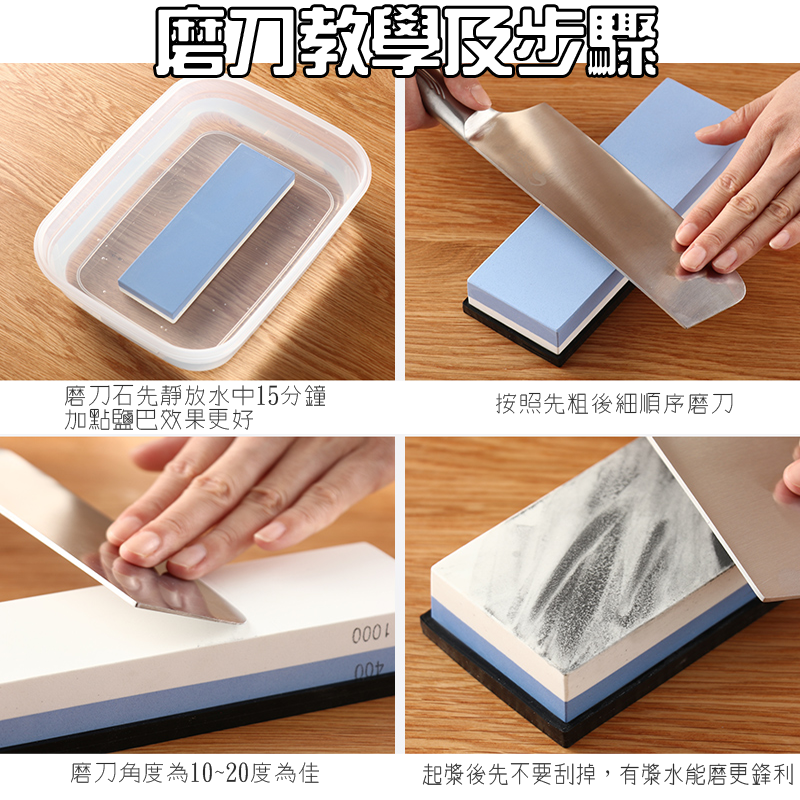
<style>
.page{position:relative;width:800px;height:800px}
.page>*{position:absolute;margin:0}
.t1{font:72px "HanWangZonYi";color:#ffffff}
.t2{font:24px "winman-tun33014";color:#2c2c2c}
.t3{font:25px "winman-tun33014";color:#2c2c2c;scale:0.88 1}
</style>
<div class="page">
<p class="t1" style="left:156px;top:7px;width:500px;height:68px">磨刀教學及步驟</p>
<p class="t2" style="left:64px;top:384px;width:261px;height:46px">磨刀石先靜放水中15分鐘<br>加點鹽巴效果更好</p>
<p class="t2" style="left:496px;top:392px;width:237px;height:22px">按照先粗後細順序磨刀</p>
<p class="t2" style="left:71px;top:762px;width:248px;height:21px">磨刀角度為10~20度為佳</p>
<p class="t3" style="left:422px;top:763px;width:371px;height:22px">起漿後先不要刮掉，有漿水能磨更鋒利</p>
</div>
